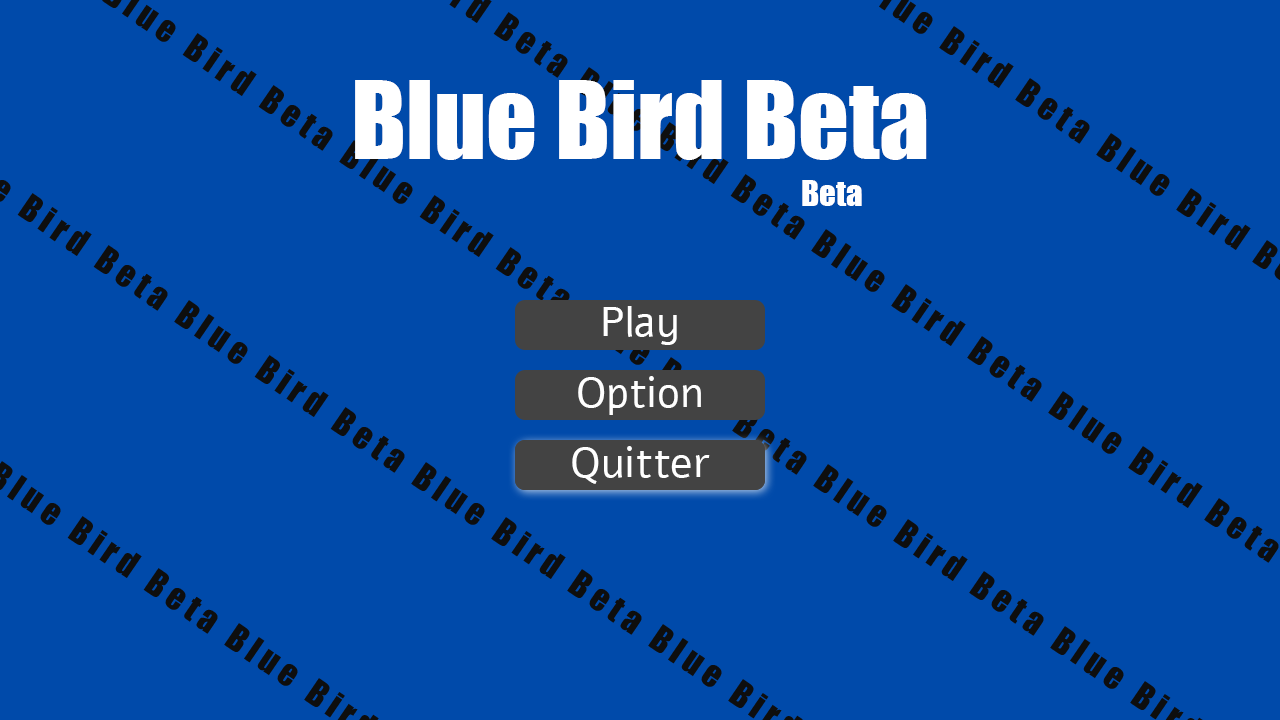
<style>
.page{position:relative;width:1280px;height:720px;background:#004aaa}
.page>*{position:absolute;margin:0}
.t1{font:100px "Impact";color:#ffffff}
.t2{font:33.3px "Impact";color:#ffffff}
.t3{font:41.7px "Alef-Regular";color:#ffffff}
</style>
<div class="page">
<p class="t1" style="left:355px;top:80px;width:572px;height:80px">Blue Bird Beta</p>
<p class="t2" style="left:802px;top:180px;width:60px;height:26px">Beta</p>
<p class="t3" style="left:603px;top:306px;width:74px;height:39px">Play</p>
<p class="t3" style="left:578px;top:376px;width:123px;height:39px">Option</p>
<p class="t3" style="left:572px;top:446px;width:138px;height:38px">Quitter</p>
</div>
